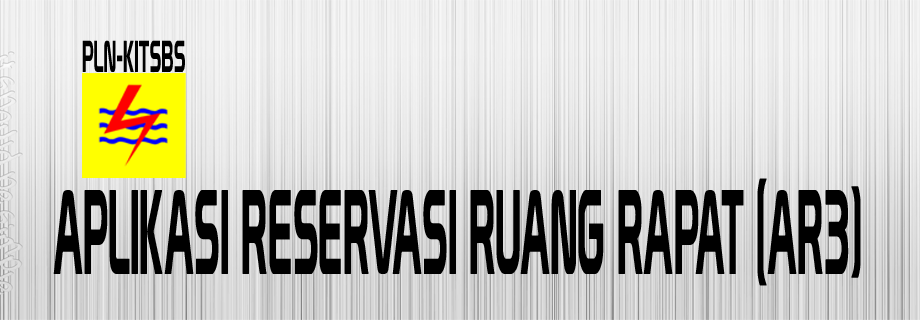
<style>
.page{position:relative;width:920px;height:320px}
.page>*{position:absolute;margin:0}
.t1{font:43.8px "Prototype";color:#000000;scale:0.44 1}
.t2{font:117px "Prototype";color:#000000;scale:0.36 1}
</style>
<div class="page">
<p class="t1" style="left:82px;top:40px;width:103px;height:32px">PLN-KITSBS</p>
<p class="t2" style="left:53px;top:178px;width:808px;height:108px">APLIKASI RESERVASI RUANG RAPAT (AR3)</p>
</div>
